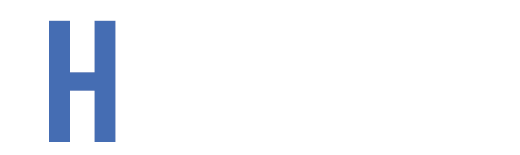
<style>
.page{position:relative;width:520px;height:155px;background:#ffffff}
.page>*{position:absolute;margin:0}
.t1{font:154.3px "Bebas";color:#456db3}
.t2{font:136px "Bebas";color:#456db3;scale:1.13 1}
</style>
<div class="page">
<p class="t1" style="left:49px;top:1px;width:67px;height:139px">H</p>
<p class="t2" style="left:49px;top:20px;width:67px;height:122px">H</p>
</div>
